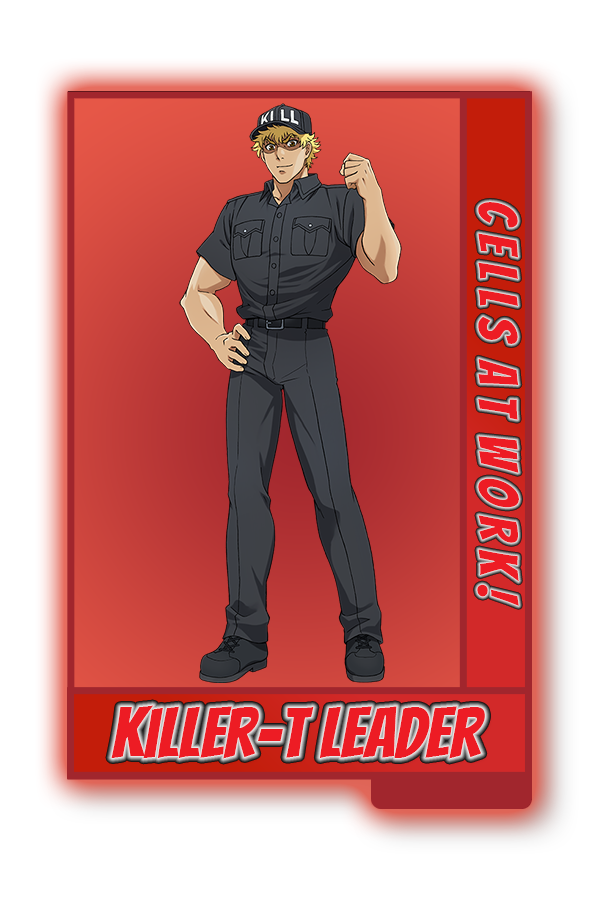
<style>
.page{position:relative;width:600px;height:900px;background:#ffffff}
.page>*{position:absolute;margin:0}
.t1{font:54px "Bangers-Regular";color:#ed1c24}
.t2{font:70px "Bangers-Regular";color:#ed1c24}
</style>
<div class="page">
<p class="t1" style="left:477px;top:202px;width:42px;height:404px;rotate:90deg">C e l l S  A t  W o r k !</p>
<p class="t2" style="left:111px;top:705px;width:374px;height:54px">Killer-t Leader</p>
</div>
